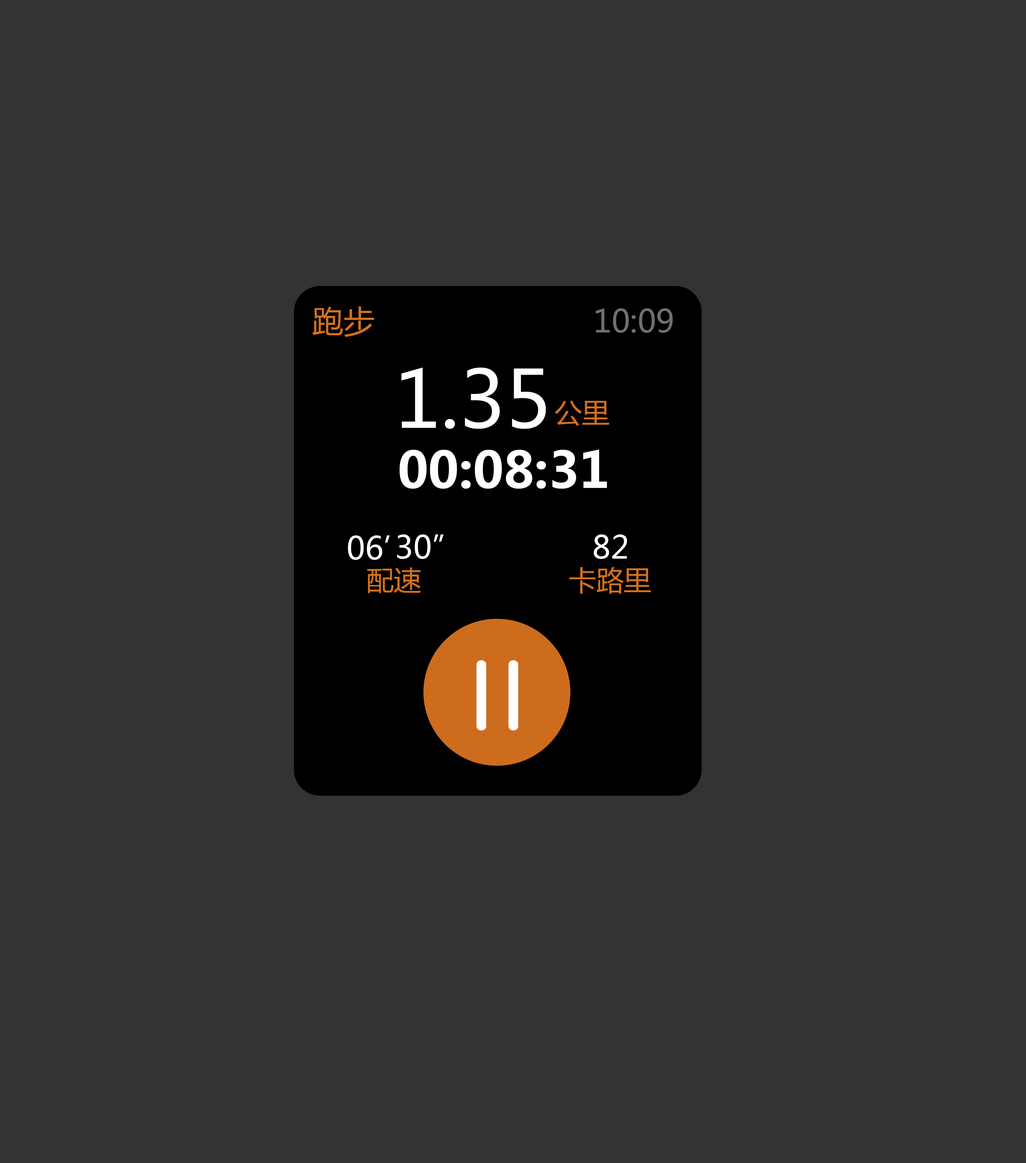
<style>
.page{position:relative;width:1026px;height:1163px;background:#333333}
.page>*{position:absolute;margin:0}
.t1{font:31.4px "MicrosoftYaHei";color:#e37820}
.t2{font:31.4px "MicrosoftYaHei";color:#717071}
.t3{font:78.4px "MicrosoftYaHei";color:#ffffff}
.t4{font:27.4px "MicrosoftYaHei";color:#e37820}
.t5{font:49.6px "MicrosoftYaHei-Bold";color:#ffffff}
.t6{font:31.4px "MicrosoftYaHei";color:#ffffff}
</style>
<div class="page">
<p class="t1" style="left:312px;top:306px;width:62px;height:31px;opacity:0.9">跑步</p>
<p class="t2" style="left:595px;top:308px;width:78px;height:25px">10:09</p>
<p class="t3" style="left:401px;top:367px;width:145px;height:62px">1.35</p>
<p class="t4" style="left:555px;top:400px;width:54px;height:26px;opacity:0.9">公里</p>
<p class="t5" style="left:399px;top:449px;width:208px;height:40px">00:08:31</p>
<p class="t6" style="left:348px;top:535px;width:42px;height:25px">06’</p>
<p class="t6" style="left:397px;top:534px;width:46px;height:25px">30”</p>
<p class="t6" style="left:594px;top:534px;width:33px;height:25px">82</p>
<p class="t4" style="left:367px;top:567px;width:54px;height:26px;opacity:0.9">配速</p>
<p class="t4" style="left:569px;top:567px;width:82px;height:27px;opacity:0.9">卡路里</p>
</div>
